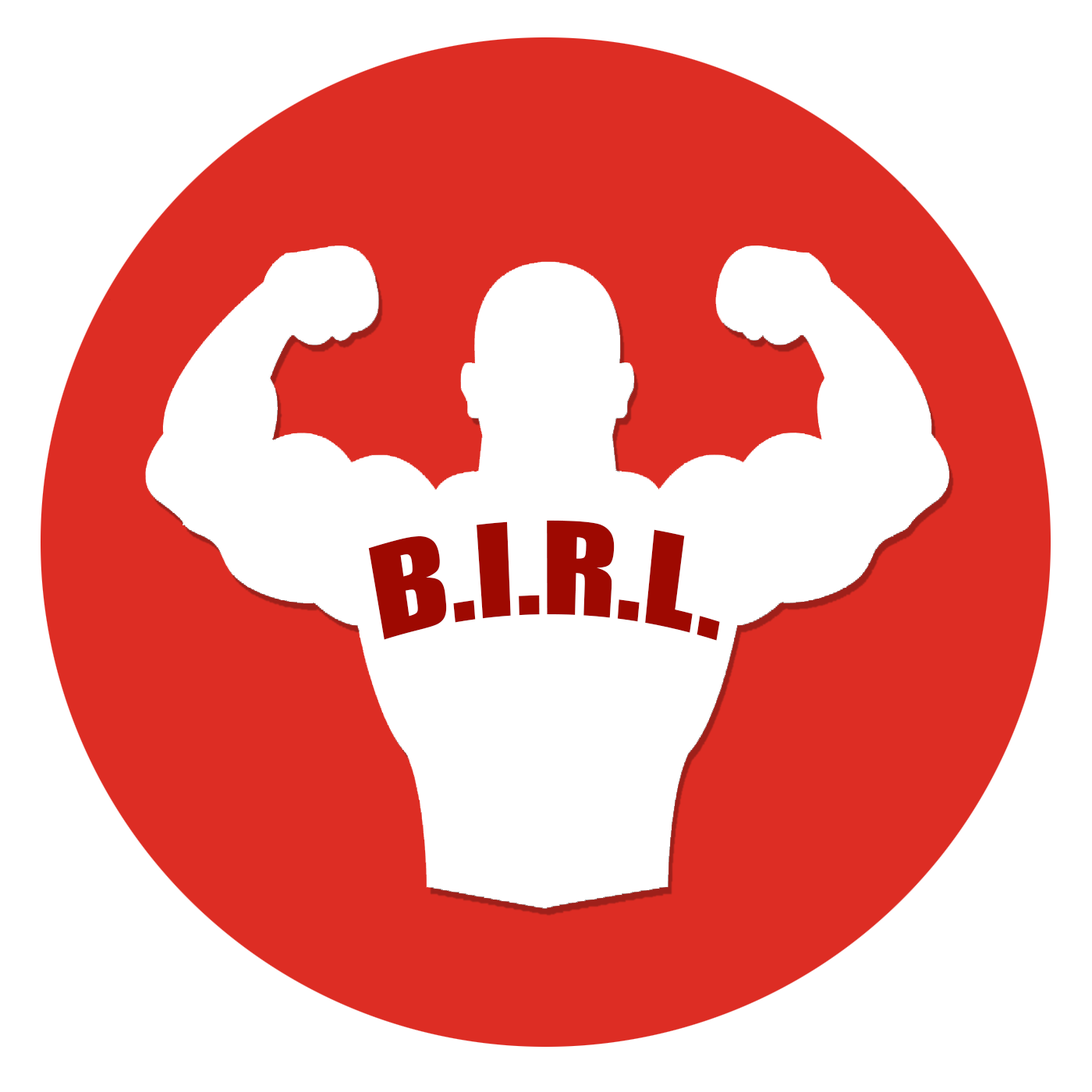
<style>
.page{position:relative;width:1092px;height:1092px;background:#ffffff}
.page>*{position:absolute;margin:0}
.t1{font:121.8px "Impact";color:#9e0901}
</style>
<div class="page">
<p class="t1" style="left:368px;top:520px;width:352px;height:121px">B.I.R.L.</p>
</div>
